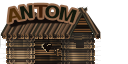
<style>
.page{position:relative;width:128px;height:64px;background:#ffffff}
.page>*{position:absolute;margin:0}
.t1{font:18px "Helvetica-Bold";letter-spacing:-0.075em;color:#12170c}
.t2{font:18px "Helvetica-Bold";letter-spacing:-0.075em;color:#512f0a}
.t3{font:18px "Helvetica-Bold";letter-spacing:-0.075em;color:#3f1e08}
</style>
<div class="page">
<p class="t1" style="left:8px;top:4px;width:70px;height:19px"><span class="t2">A</span>N<span class="t3">T</span>OM</p>
</div>
